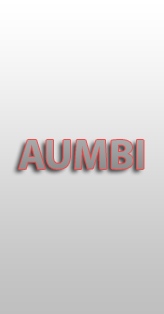
<style>
.page{position:relative;width:164px;height:314px}
.page>*{position:absolute;margin:0}
.t1{font:42.4px "MyriadPro-Bold";color:#9b9b9b}
</style>
<div class="page">
<p class="t1" style="left:19px;top:140px;width:125px;height:29px">AUMBI</p>
</div>
